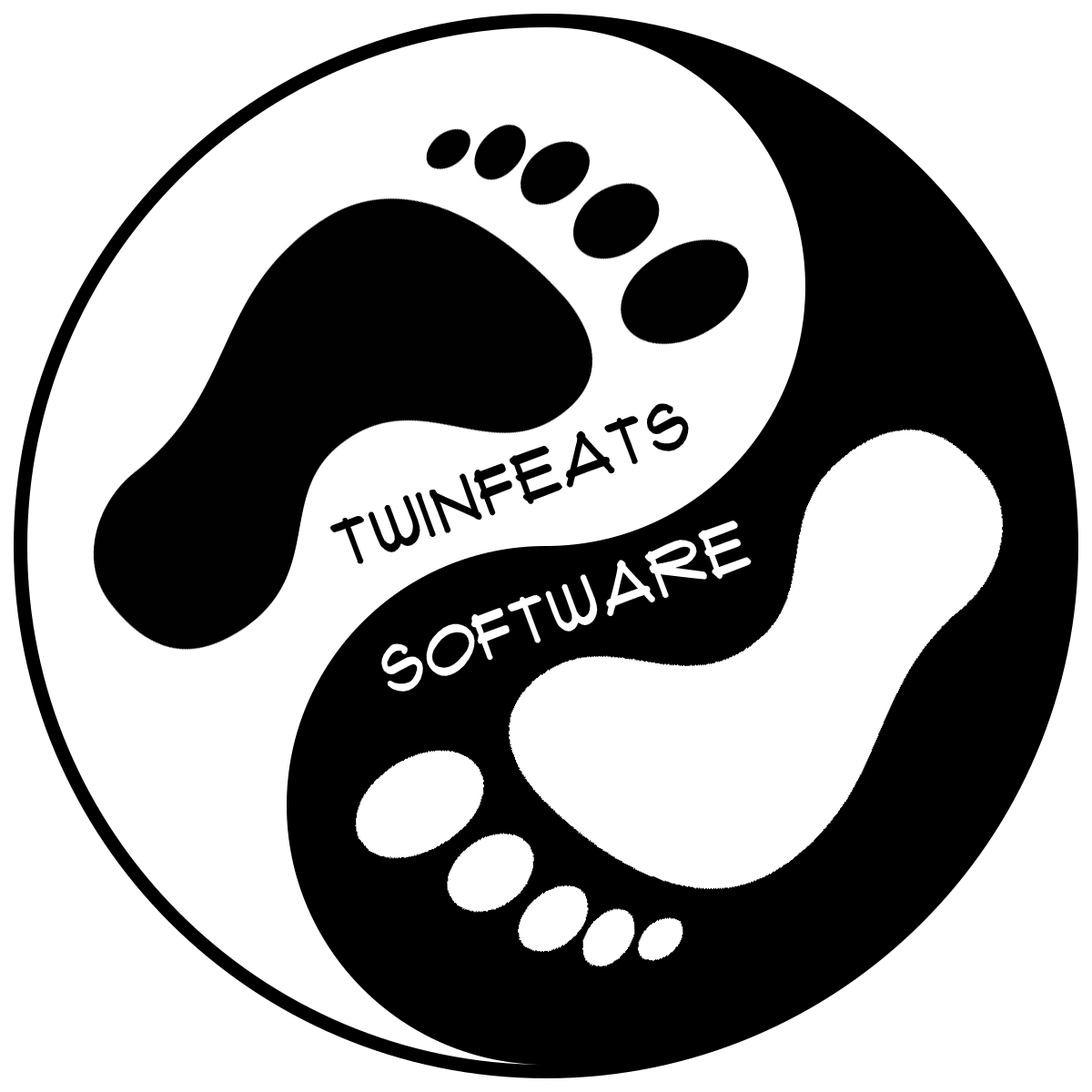
<style>
.page{position:relative;width:1092px;height:1092px;background:#ffffff}
.page>*{position:absolute;margin:0}
.t1{font:65.5px "Flux-Architect";color:#000000}
.t2{font:65.5px "Flux-Architect";color:#ffffff}
</style>
<div class="page">
<p class="t1" style="left:330px;top:403px;width:359px;height:161px;rotate:-20deg">TWINFEATS</p>
<p class="t2" style="left:381px;top:521px;width:371px;height:171px;rotate:-20deg">SOFTWARE</p>
</div>
